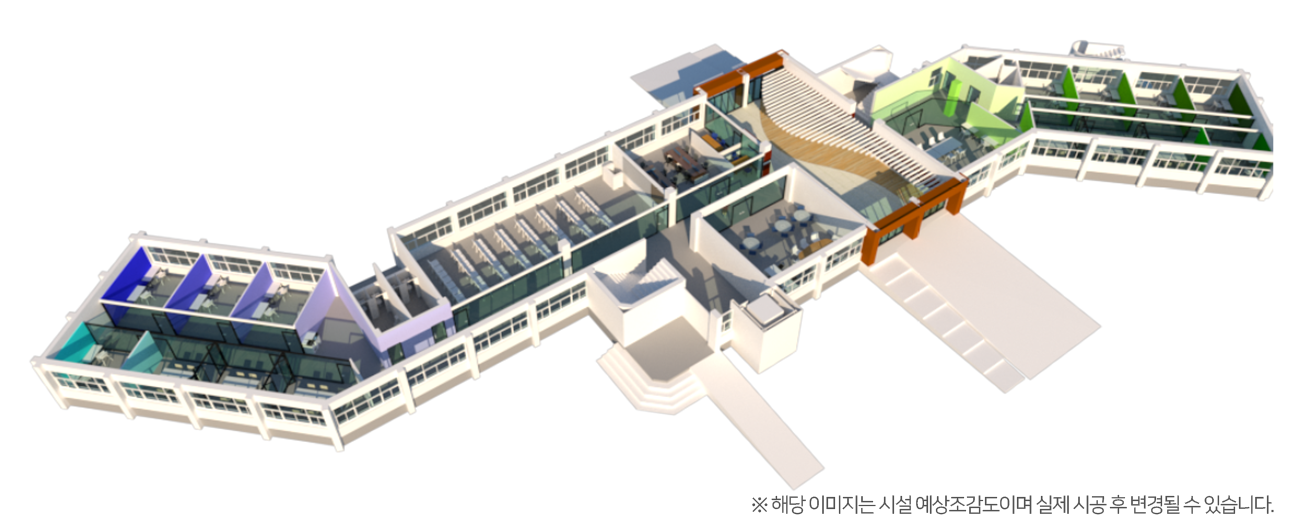
<style>
.page{position:relative;width:1290px;height:532px;background:#ffffff}
.page>*{position:absolute;margin:0}
.t1{font:20px "NanumSquareR";letter-spacing:-0.075em;color:#505050}
</style>
<div class="page">
<p class="t1" style="left:752px;top:494px;width:522px;height:21px">※ 해당 이미지는 시설 예상조감도이며 실제 시공 후 변경될 수 있습니다.</p>
</div>
